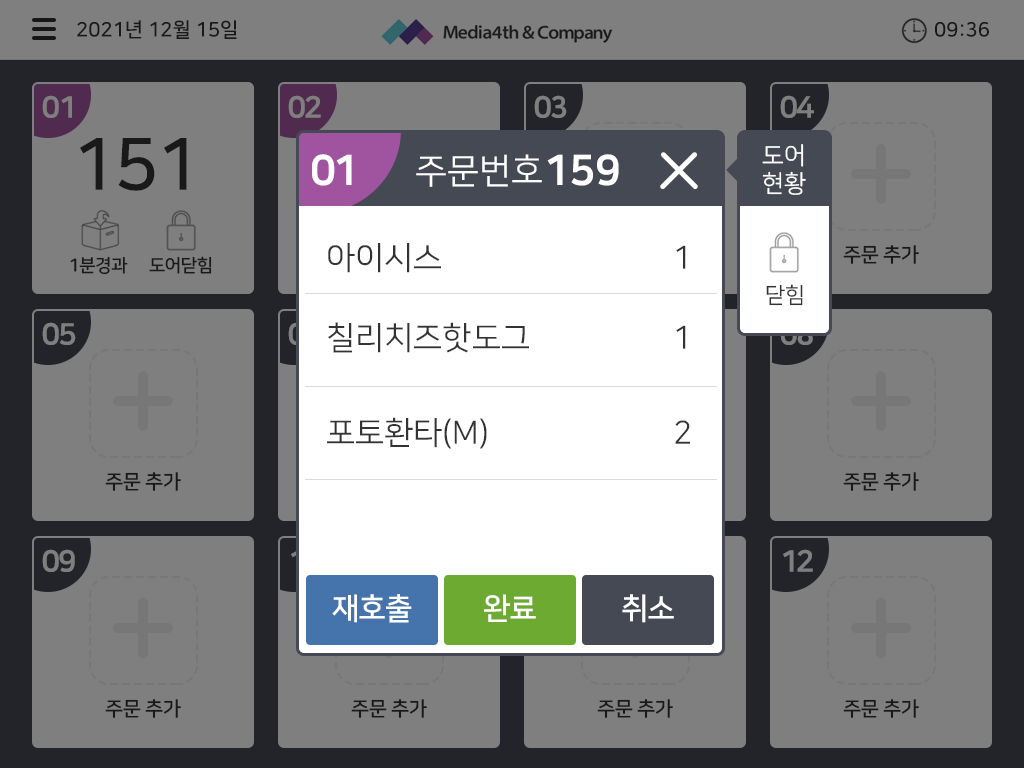
<style>
.page{position:relative;width:1024px;height:768px;background:#7f7f7f}
.page>*{position:absolute;margin:0}
.t1{font:20px "NanumSquareB";color:#191919}
.t2{font:30px "NanumSquareEB";letter-spacing:-0.075em;color:#7f7f7f}
.t3{font:72px "NanumSquareB";letter-spacing:-0.025em;color:#191919}
.t4{font:24px/28px "NanumSquareR";color:#ffffff}
.t5{font:42px "NanumSquareEB";color:#ffffff}
.t6{font:35px "NanumSquareR";color:#ffffff}
.t7{font:32px/80px "NanumSquareR";color:#333333}
.t8{font:32px/95px "NanumSquareR";color:#333333}
.t9{font:20px "NanumSquareB";letter-spacing:-0.025em;color:#191919}
.t10{font:18px "NanumSquareB";letter-spacing:-0.025em;color:#191919}
.t11{font:22px "NanumSquareR";color:#333333}
.t12{font:30px "NanumSquareB";letter-spacing:-0.025em;color:#ffffff}
</style>
<div class="page">
<p class="t1" style="left:77px;top:20px;width:160px;height:19px">2021년 12월 15일</p>
<p class="t1" style="left:935px;top:22px;width:54px;height:15px">09:36</p>
<p class="t2" style="left:42px;top:95px;width:30px;height:23px">01</p>
<p class="t2" style="left:288px;top:95px;width:33px;height:23px">02</p>
<p class="t2" style="left:534px;top:95px;width:33px;height:23px">03</p>
<p class="t2" style="left:780px;top:95px;width:34px;height:23px">04</p>
<p class="t3" style="left:80px;top:138px;width:107px;height:53px">151</p>
<p class="t4" style="left:762px;top:144px;width:44px;height:51px">도어<br>현황</p>
<p class="t5" style="left:312px;top:154px;width:40px;height:32px">01</p>
<p class="t6" style="left:416px;top:154px;width:203px;height:33px">주문번호<span class="t5">159</span></p>
<p class="t7" style="left:327px;top:243px;width:202px;height:206px">아이시스<br>칠리치즈핫도그<span class="t8"><br>포토환타(M)</span></p>
<p class="t7" style="left:675px;top:245px;width:15px;height:199px">1<br>1<span class="t8"><br>2</span></p>
<p class="t9" style="left:843px;top:245px;width:76px;height:19px">주문 추가</p>
<p class="t10" style="left:70px;top:256px;width:58px;height:19px">1분경과</p>
<p class="t10" style="left:149px;top:256px;width:63px;height:18px">도어닫힘</p>
<p class="t11" style="left:766px;top:284px;width:37px;height:22px">닫힘</p>
<p class="t2" style="left:42px;top:322px;width:34px;height:23px">05</p>
<p class="t9" style="left:105px;top:472px;width:76px;height:19px">주문 추가</p>
<p class="t9" style="left:843px;top:472px;width:76px;height:19px">주문 추가</p>
<p class="t2" style="left:42px;top:549px;width:33px;height:23px">09</p>
<p class="t2" style="left:783px;top:549px;width:30px;height:23px">12</p>
<p class="t12" style="left:332px;top:594px;width:80px;height:29px">재호출</p>
<p class="t12" style="left:484px;top:594px;width:52px;height:28px">완료</p>
<p class="t12" style="left:622px;top:594px;width:52px;height:29px">취소</p>
<p class="t9" style="left:105px;top:699px;width:76px;height:19px">주문 추가</p>
<p class="t9" style="left:351px;top:699px;width:76px;height:19px">주문 추가</p>
<p class="t9" style="left:597px;top:699px;width:76px;height:19px">주문 추가</p>
<p class="t9" style="left:843px;top:699px;width:76px;height:19px">주문 추가</p>
</div>
